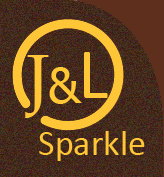
<style>
.page{position:relative;width:164px;height:177px}
.page>*{position:absolute;margin:0}
.t1{font:72px "Calibri";color:#ffc637}
.t2{font:72px "PalatinoLinotype-Roman";color:#ffc637}
.t3{font:48px "Tahoma";color:#ffc834}
.t4{font:36px "Calibri";color:#ffc637}
</style>
<div class="page">
<p class="t1" style="left:84px;top:52px;width:24px;height:46px">L</p>
<p class="t2" style="left:25px;top:55px;width:24px;height:63px">J</p>
<p class="t3" style="left:49px;top:67px;width:33px;height:37px">&amp;</p>
<p class="t4" style="left:39px;top:131px;width:106px;height:30px">Sparkle</p>
</div>
